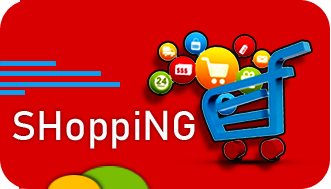
<style>
.page{position:relative;width:331px;height:189px;background:#d80000}
.page>*{position:absolute;margin:0}
.t1{font:41.3px "Bahnschrift";color:#fbfbfc}
</style>
<div class="page">
<p class="t1" style="left:12px;top:110px;width:183px;height:39px">SHoppiNG</p>
</div>
